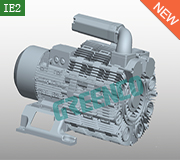
<style>
.page{position:relative;width:180px;height:160px}
.page>*{position:absolute;margin:0}
.t1{font:12px "SimSun";color:#ffffff}
.t2{font:12px "ArialMT";color:#ffffff}
</style>
<div class="page">
<p class="t1" style="left:4px;top:4px;width:17px;height:8px">IE2</p>
<p class="t2" style="left:153px;top:2px;width:26px;height:23px;rotate:42deg">NEW</p>
</div>
